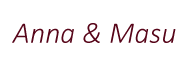
<style>
.page{position:relative;width:189px;height:79px;background:#ffffff}
.page>*{position:absolute;margin:0}
.t1{font:30px "Calibri-LightItalic";color:#570519}
</style>
<div class="page">
<p class="t1" style="left:12px;top:23px;width:164px;height:20px">Anna &amp; Masu</p>
</div>
